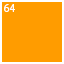
<style>
.page{position:relative;width:64px;height:64px;background:#ff9c00}
.page>*{position:absolute;margin:0}
.t1{font:11px "MyriadPro-Regular";color:#ffffff}
</style>
<div class="page">
<p class="t1" style="left:4px;top:4px;width:11px;height:8px">64</p>
</div>
